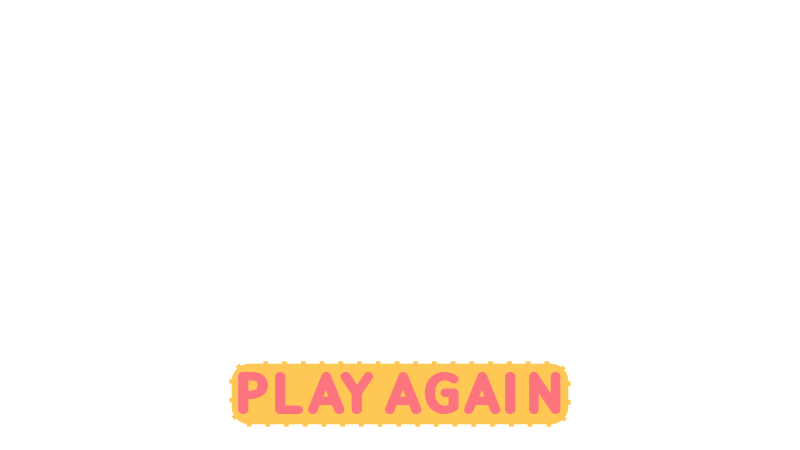
<style>
.page{position:relative;width:800px;height:450px;background:#ffffff}
.page>*{position:absolute;margin:0}
.t1{font:58.3px "RobagaRoundedBlack";letter-spacing:-0.025em;color:#fc747e}
</style>
<div class="page">
<p class="t1" style="left:238px;top:372px;width:323px;height:42px">PLAY AGAIN</p>
</div>
